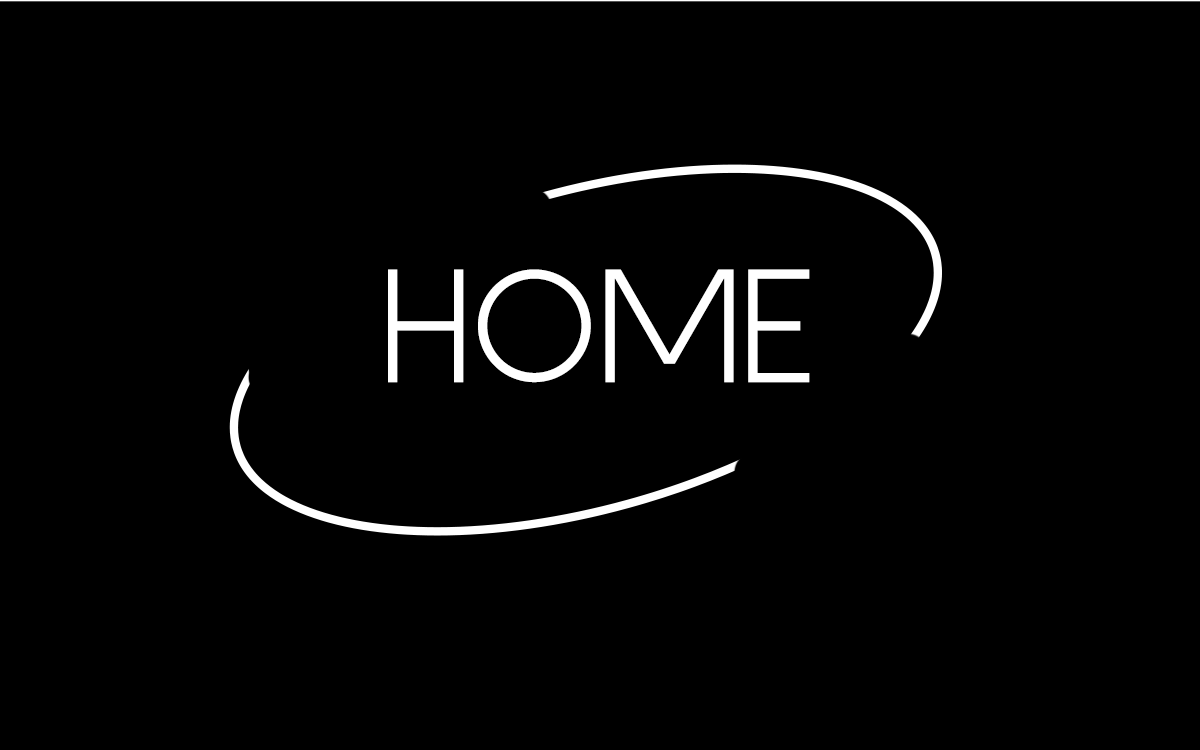
<style>
.page{position:relative;width:1200px;height:750px;background:#000000}
.page>*{position:absolute;margin:0}
.t1{font:150px "Aspergit-Bold";color:#ffffff}
</style>
<div class="page">
<p class="t1" style="left:388px;top:269px;width:422px;height:114px">HOME</p>
</div>
